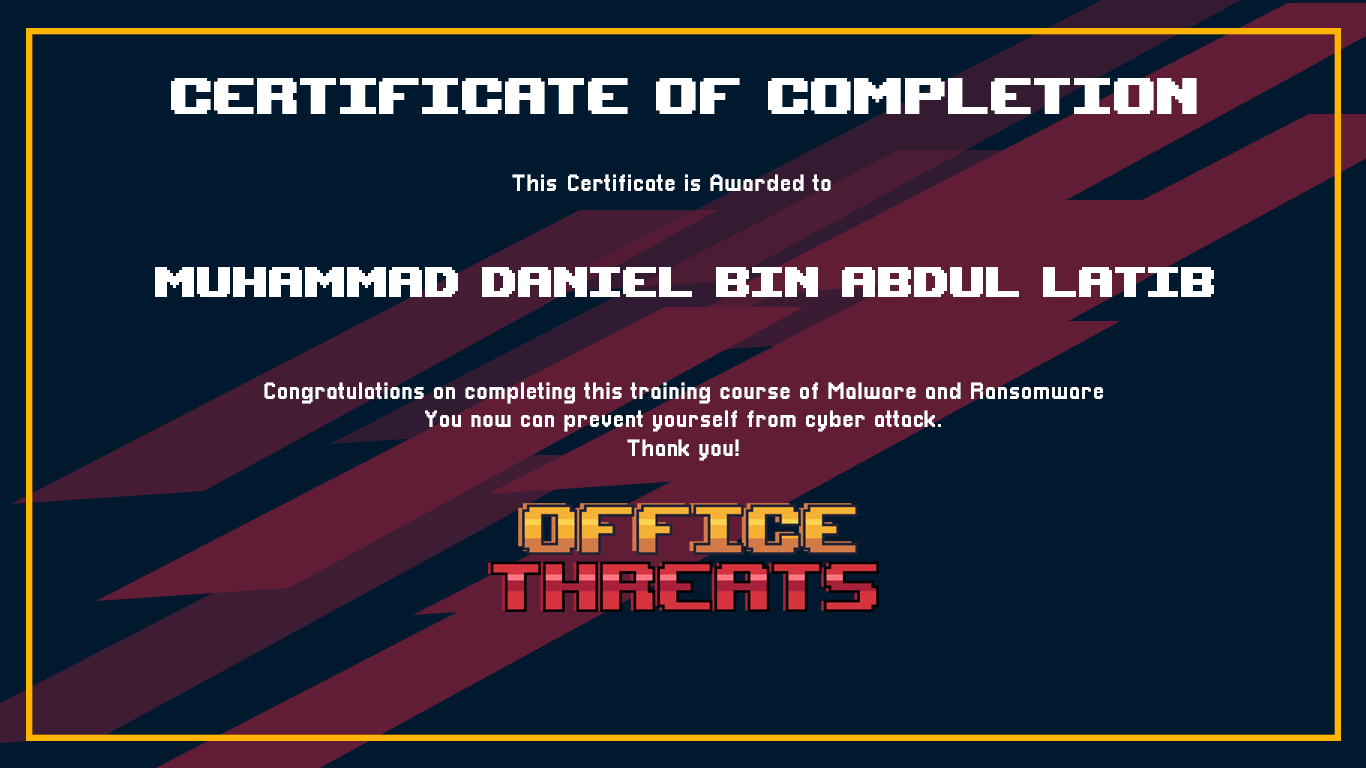
<style>
.page{position:relative;width:1366px;height:768px;background:#00192f}
.page>*{position:absolute;margin:0}
.t1{font:24px "Pixellari";color:#ffffff}
.t2{font:60px "UpheavalTT-BRK-";color:#ffffff}
</style>
<div class="page">
<p class="t1" style="left:512px;top:174px;width:319px;height:17px">This Certificate is Awarded to</p>
<p class="t2" style="left:155px;top:267px;width:1059px;height:30px">muhammad daniel bin abdul latib</p>
<p class="t1" style="left:264px;top:382px;width:839px;height:79px;text-align:center">Congratulations on completing this training course of Malware and Ransomware<br>You now can prevent yourself from cyber attack.<br>Thank you!</p>
</div>
